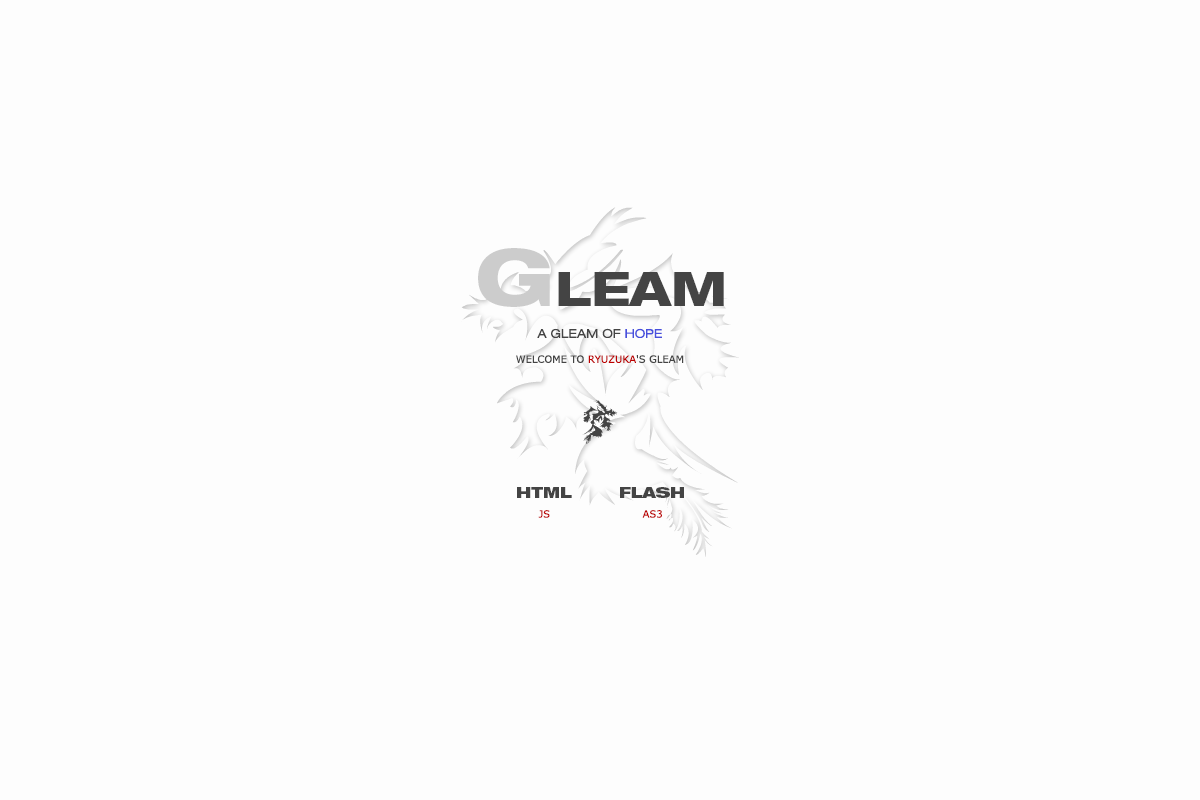
<style>
.page{position:relative;width:1200px;height:800px;background:#fdfdfd}
.page>*{position:absolute;margin:0}
.t1{font:48px "HelveticaNeueLTStd-HvEx";color:#444444}
.t2{font:80px "HelveticaNeueLTStd-HvEx";color:#cccccc}
.t3{font:12px "HelveticaNeueLTStd-Ex";color:#444444}
.t4{font:12px "HelveticaNeueLTStd-Ex";color:#4850dd}
.t5{font:10px "Verdana";color:#444444}
.t6{font:10px "Verdana";color:#bd0000}
.t7{font:15px "HelveticaNeueLTStd-BlkEx";color:#444444}
</style>
<div class="page">
<p class="t1" style="left:478px;top:248px;width:246px;height:59px"><span class="t2">G</span>LEAM</p>
<p class="t3" style="left:537px;top:328px;width:125px;height:10px">A GLEAM OF <span class="t4">HOPE</span></p>
<p class="t5" style="left:516px;top:355px;width:168px;height:8px">WELCOME TO <span class="t6">RYUZUKA</span>'S GLEAM</p>
<p class="t7" style="left:517px;top:487px;width:55px;height:11px">HTML</p>
<p class="t7" style="left:620px;top:487px;width:64px;height:11px">FLASH</p>
<p class="t6" style="left:538px;top:510px;width:12px;height:8px">JS</p>
<p class="t6" style="left:642px;top:510px;width:20px;height:8px">AS3</p>
</div>
